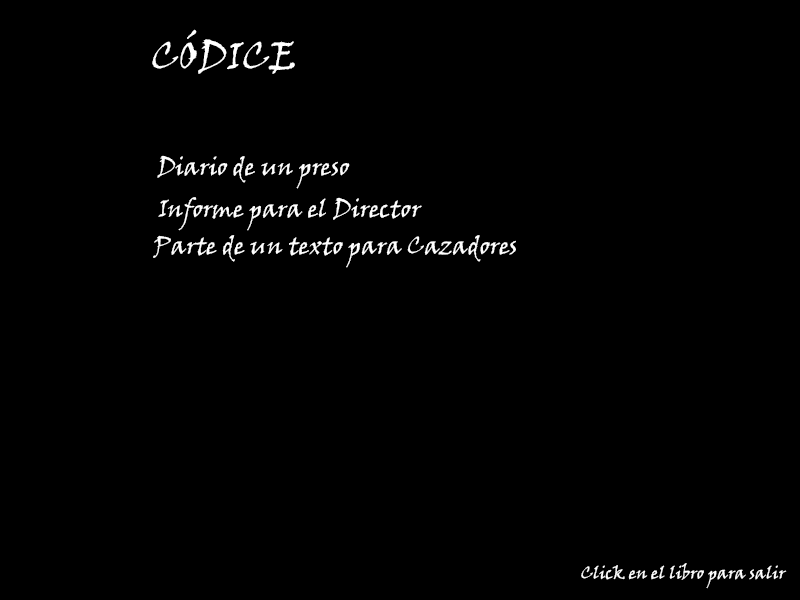
<style>
.page{position:relative;width:800px;height:600px;background:#000000}
.page>*{position:absolute;margin:0}
.t1{font:38.4px "VinerHandITC";color:#ffffff}
.t2{font:24.2px "VinerHandITC";color:#ffffff}
.t3{font:17.1px "VinerHandITC";color:#ffffff}
</style>
<div class="page">
<p class="t1" style="left:152px;top:29px;width:143px;height:45px">CÓDICE</p>
<p class="t2" style="left:157px;top:155px;width:193px;height:34px">Diario de un preso</p>
<p class="t2" style="left:158px;top:197px;width:264px;height:34px">Informe para el Director</p>
<p class="t2" style="left:153px;top:235px;width:363px;height:33px">Parte de un texto para Cazadores</p>
<p class="t3" style="left:581px;top:563px;width:206px;height:26px">Click en el libro para salir</p>
</div>
